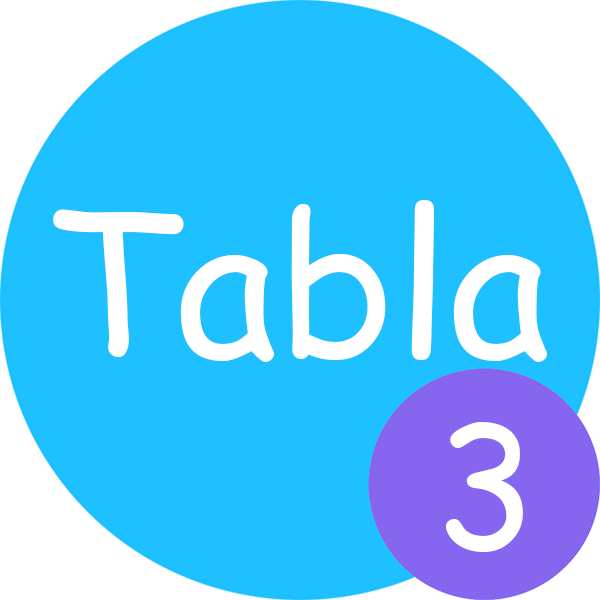
<style>
.page{position:relative;width:600px;height:600px;background:#1fc0ff}
.page>*{position:absolute;margin:0}
.t1{font:198px "ComicSansMS";color:#ffffff}
.t2{font:168.5px "ComicSansMS";color:#ffffff}
</style>
<div class="page">
<p class="t1" style="left:53px;top:199px;width:494px;height:163px">Tabla</p>
<p class="t2" style="left:445px;top:422px;width:78px;height:130px">3</p>
</div>
